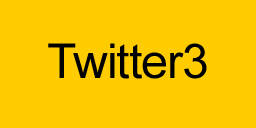
<style>
.page{position:relative;width:256px;height:128px;background:#ffcc00}
.page>*{position:absolute;margin:0}
.t1{font:48px "ArialMT";letter-spacing:-0.02em;color:#000000}
</style>
<div class="page">
<p class="t1" style="left:48px;top:43px;width:159px;height:36px">Twitter3</p>
</div>
